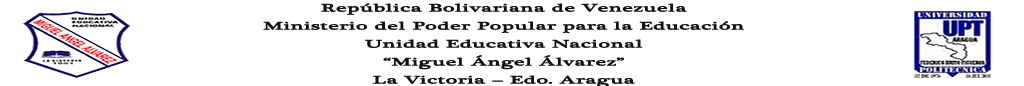
<style>
.page{position:relative;width:1024px;height:86px;background:#ffffff}
.page>*{position:absolute;margin:0}
.t1{font:11px/18px "PlantagenetCherokee";color:#111010;font-weight:bold;scale:2 1}
</style>
<div class="page">
<p class="t1" style="left:263px;top:3px;width:481px;height:85px;text-align:center">República Bolivariana de Venezuela<br>Ministerio del Poder Popular para la Educación<br>Unidad Educativa Nacional<br>“Miguel Ángel Álvarez”<br>La Victoria – Edo. Aragua</p>
</div>
